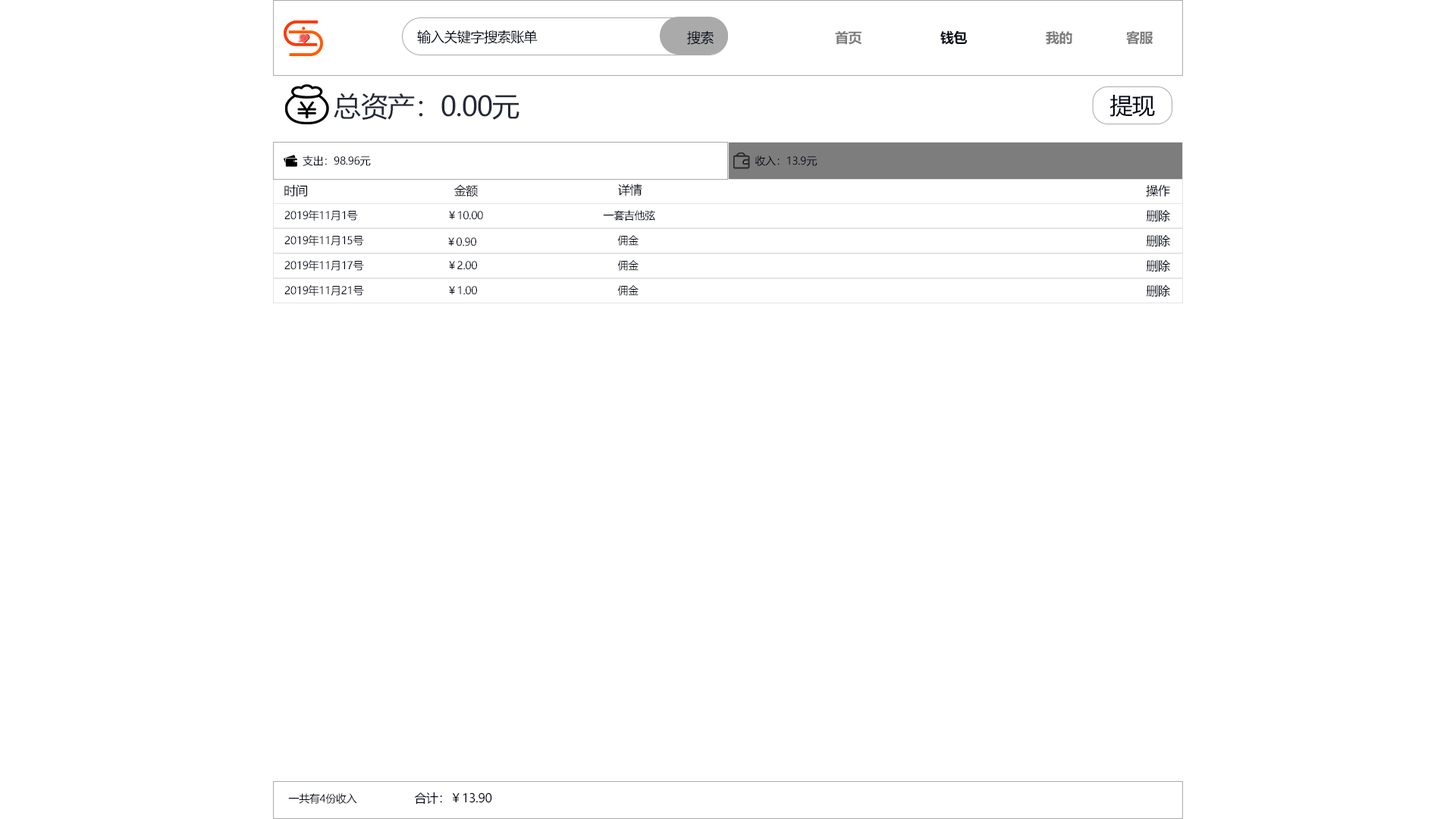
<style>
.page{position:relative;width:1456px;height:819px;background:#ffffff}
.page>*{position:absolute;margin:0}
.t1{font:13.6px "MicrosoftYaHei";letter-spacing:-0.024em;color:#010717}
.t2{font:13.6px "MicrosoftYaHei-Bold";letter-spacing:-0.024em;color:#7d7d7d}
.t3{font:13.6px "MicrosoftYaHei-Bold";letter-spacing:-0.024em;color:#010717}
.t4{font:27.3px "MicrosoftYaHei";letter-spacing:-0.024em;color:#242938}
.t5{font:22.7px "MicrosoftYaHei";letter-spacing:-0.024em;color:#020818}
.t6{font:10.6px "MicrosoftYaHei";letter-spacing:-0.024em;color:#010717}
.t7{font:12.1px "MicrosoftYaHei";letter-spacing:-0.024em;color:#010717}
</style>
<div class="page">
<p class="t1" style="left:417px;top:30px;width:121px;height:14px">输入关键字搜索账单</p>
<p class="t1" style="left:687px;top:31px;width:27px;height:14px">搜索</p>
<p class="t2" style="left:835px;top:30px;width:26px;height:15px">首页</p>
<p class="t3" style="left:940px;top:30px;width:28px;height:15px">钱包</p>
<p class="t2" style="left:1046px;top:31px;width:26px;height:14px">我的</p>
<p class="t2" style="left:1126px;top:31px;width:27px;height:14px">客服</p>
<p class="t4" style="left:334px;top:93px;width:185px;height:27px">总资产：0.00元</p>
<p class="t5" style="left:1110px;top:95px;width:45px;height:22px">提现</p>
<p class="t6" style="left:303px;top:155px;width:68px;height:11px">支出：98.96元</p>
<p class="t6" style="left:755px;top:155px;width:62px;height:11px">收入：13.9元</p>
<p class="t7" style="left:284px;top:184px;width:23px;height:12px">时间</p>
<p class="t7" style="left:454px;top:184px;width:24px;height:13px">金额</p>
<p class="t7" style="left:618px;top:184px;width:24px;height:12px">详情</p>
<p class="t7" style="left:1146px;top:184px;width:24px;height:13px">操作</p>
<p class="t7" style="left:1146px;top:209px;width:24px;height:13px">删除</p>
<p class="t6" style="left:284px;top:210px;width:74px;height:11px">2019年11月1号</p>
<p class="t6" style="left:449px;top:211px;width:34px;height:9px">￥10.00</p>
<p class="t6" style="left:603px;top:210px;width:52px;height:11px">一套吉他弦</p>
<p class="t6" style="left:284px;top:235px;width:80px;height:11px">2019年11月15号</p>
<p class="t6" style="left:448px;top:237px;width:28px;height:9px">￥0.90</p>
<p class="t6" style="left:617px;top:235px;width:22px;height:11px">佣金</p>
<p class="t7" style="left:1146px;top:234px;width:24px;height:13px">删除</p>
<p class="t6" style="left:284px;top:260px;width:80px;height:11px">2019年11月17号</p>
<p class="t6" style="left:449px;top:261px;width:28px;height:9px">￥2.00</p>
<p class="t6" style="left:617px;top:260px;width:22px;height:11px">佣金</p>
<p class="t7" style="left:1146px;top:259px;width:24px;height:13px">删除</p>
<p class="t6" style="left:284px;top:285px;width:80px;height:11px">2019年11月21号</p>
<p class="t6" style="left:449px;top:286px;width:28px;height:9px">￥1.00</p>
<p class="t6" style="left:617px;top:285px;width:22px;height:11px">佣金</p>
<p class="t7" style="left:1146px;top:284px;width:24px;height:13px">删除</p>
<p class="t6" style="left:288px;top:793px;width:69px;height:11px">一共有4份收入</p>
<p class="t7" style="left:414px;top:792px;width:78px;height:12px">合计：￥13.90</p>
</div>
